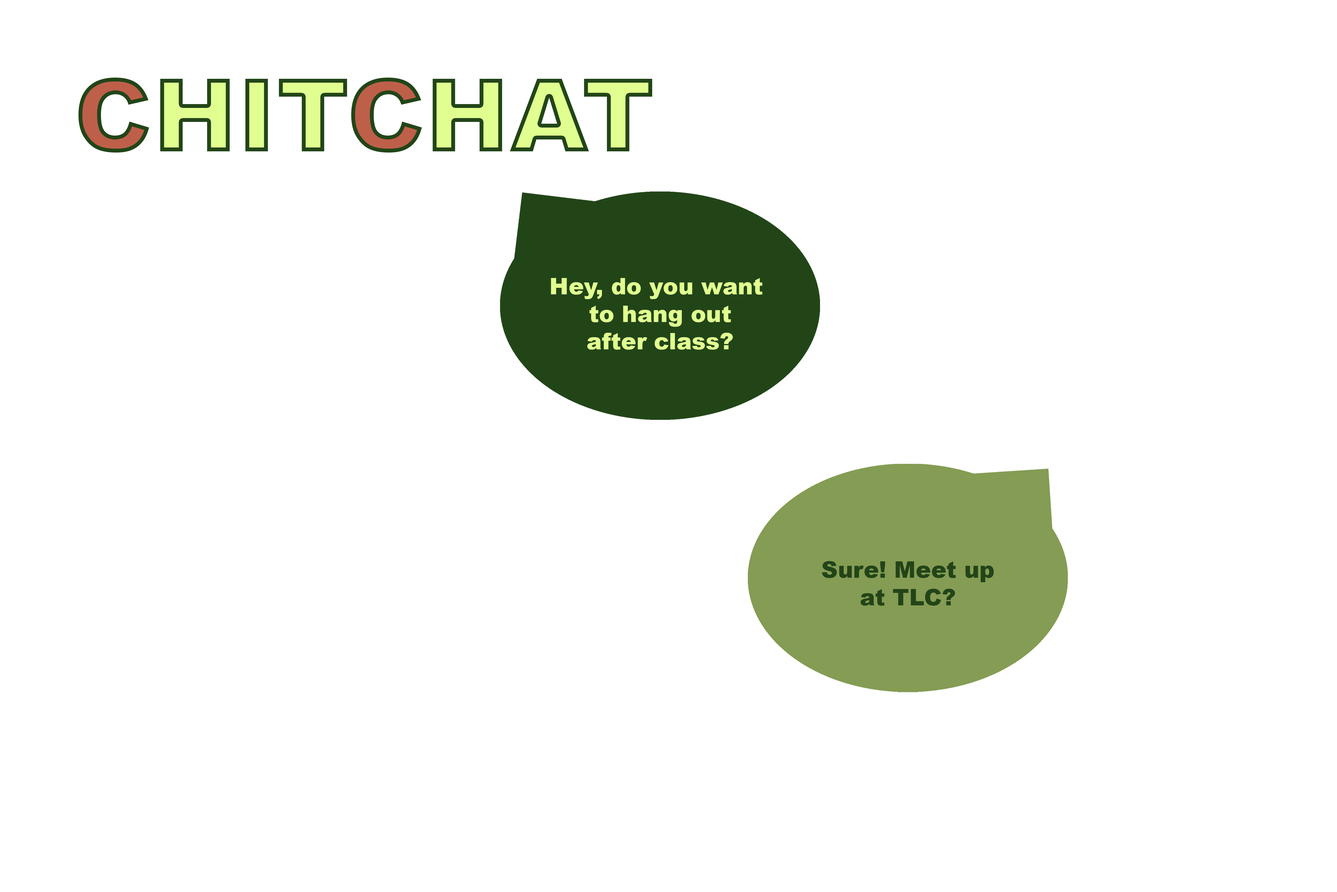
<style>
.page{position:relative;width:1337px;height:892px;background:#ffffff}
.page>*{position:absolute;margin:0}
.t1{font:101.5px "Arial-Black"}
.t2{font:22.9px "Arial-Black";color:#e1ff90}
.t3{font:22.9px "Arial-Black";color:#224418}
</style>
<div class="page">
<p class="t1" style="left:78px;top:78px;width:575px;height:74px">CHITCHAT</p>
<p class="t2" style="left:551px;top:278px;width:212px;height:72px;text-align:center">Hey, do you want <br>to hang out<br>after class?</p>
<p class="t3" style="left:822px;top:561px;width:172px;height:44px;text-align:center">Sure! Meet up<br>at TLC?</p>
</div>
